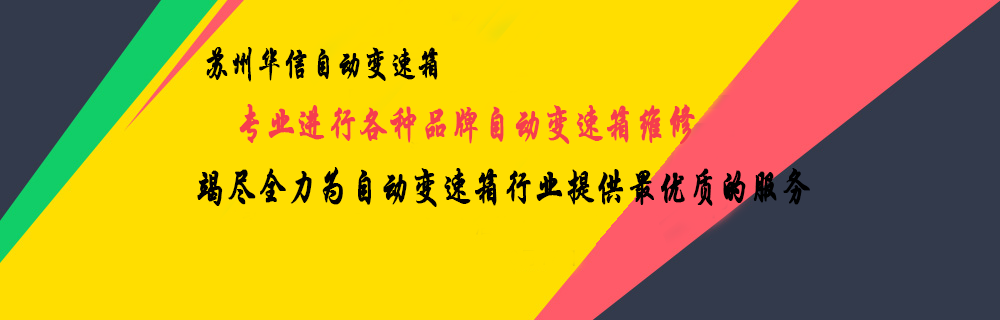
<style>
.page{position:relative;width:1000px;height:320px;background:#ffde00}
.page>*{position:absolute;margin:0}
.t1{font:36.4px "STXingkai";color:#000000;font-weight:bold;scale:0.71 1}
.t2{font:42px "STXingkai";color:#f63d4d;font-weight:bold;scale:0.71 1}
.t3{font:42px "STXingkai";color:#000000;font-weight:bold;scale:0.71 1}
</style>
<div class="page">
<p class="t1" style="left:206px;top:47px;width:232px;height:35px">苏州华信自动变速箱</p>
<p class="t2" style="left:239px;top:104px;width:456px;height:40px">专业进行各种品牌自动变速箱维修</p>
<p class="t3" style="left:197px;top:167px;width:613px;height:40px">竭尽全力为自动变速箱行业提供最优质的服务</p>
</div>
